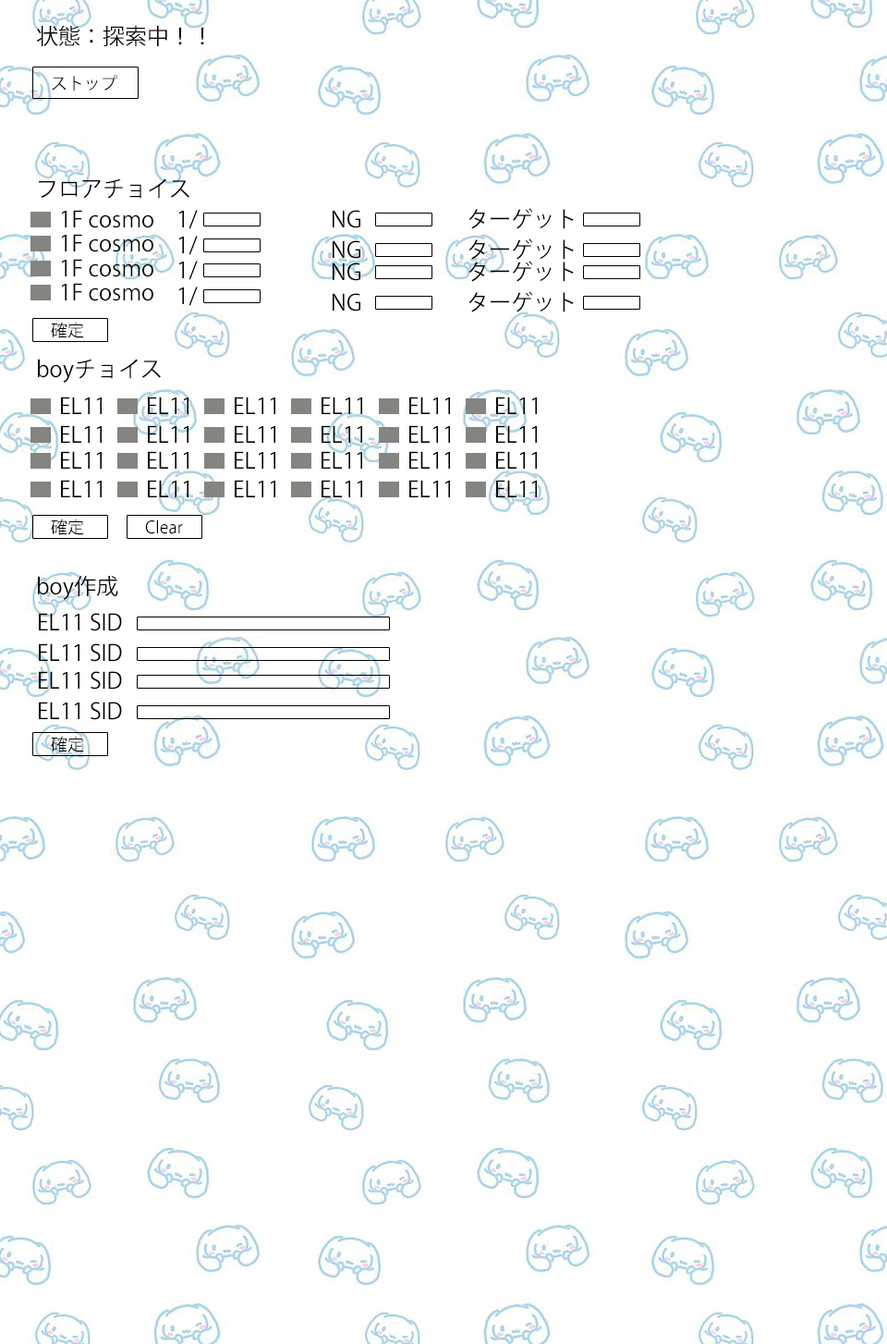
<style>
.page{position:relative;width:887px;height:1344px;background:#ffffff}
.page>*{position:absolute;margin:0}
.t1{font:22.2px "KozGoPr6N-Regular";color:#000000}
.t2{font:16.6px "KozGoPr6N-Regular";color:#000000}
</style>
<div class="page">
<p class="t1" style="left:36px;top:25px;width:168px;height:21px">状態：探索中！！</p>
<p class="t2" style="left:52px;top:75px;width:65px;height:16px">ストップ</p>
<p class="t1" style="left:39px;top:178px;width:150px;height:21px">フロアチョイス</p>
<p class="t1" style="left:61px;top:210px;width:92px;height:18px">1F cosmo</p>
<p class="t1" style="left:178px;top:210px;width:20px;height:19px">1/</p>
<p class="t1" style="left:333px;top:210px;width:27px;height:18px">NG</p>
<p class="t1" style="left:469px;top:208px;width:105px;height:21px">ターゲット</p>
<p class="t1" style="left:61px;top:234px;width:92px;height:18px">1F cosmo</p>
<p class="t1" style="left:178px;top:236px;width:20px;height:19px">1/</p>
<p class="t1" style="left:333px;top:240px;width:27px;height:19px">NG</p>
<p class="t1" style="left:469px;top:238px;width:105px;height:22px">ターゲット</p>
<p class="t1" style="left:61px;top:259px;width:92px;height:18px">1F cosmo</p>
<p class="t1" style="left:178px;top:261px;width:20px;height:19px">1/</p>
<p class="t1" style="left:333px;top:262px;width:27px;height:19px">NG</p>
<p class="t1" style="left:469px;top:261px;width:105px;height:21px">ターゲット</p>
<p class="t1" style="left:61px;top:283px;width:92px;height:18px">1F cosmo</p>
<p class="t1" style="left:178px;top:287px;width:20px;height:19px">1/</p>
<p class="t1" style="left:333px;top:293px;width:27px;height:18px">NG</p>
<p class="t1" style="left:469px;top:291px;width:105px;height:21px">ターゲット</p>
<p class="t2" style="left:51px;top:322px;width:33px;height:16px">確定</p>
<p class="t1" style="left:38px;top:359px;width:123px;height:24px">boyチョイス</p>
<p class="t1" style="left:61px;top:397px;width:41px;height:17px">EL11</p>
<p class="t1" style="left:148px;top:397px;width:41px;height:17px">EL11</p>
<p class="t1" style="left:235px;top:397px;width:40px;height:17px">EL11</p>
<p class="t1" style="left:322px;top:397px;width:40px;height:17px">EL11</p>
<p class="t1" style="left:409px;top:397px;width:41px;height:17px">EL11</p>
<p class="t1" style="left:496px;top:397px;width:41px;height:17px">EL11</p>
<p class="t1" style="left:61px;top:425px;width:41px;height:18px">EL11</p>
<p class="t1" style="left:148px;top:425px;width:41px;height:18px">EL11</p>
<p class="t1" style="left:235px;top:425px;width:40px;height:18px">EL11</p>
<p class="t1" style="left:322px;top:425px;width:40px;height:18px">EL11</p>
<p class="t1" style="left:409px;top:425px;width:41px;height:18px">EL11</p>
<p class="t1" style="left:496px;top:425px;width:41px;height:18px">EL11</p>
<p class="t1" style="left:61px;top:451px;width:41px;height:18px">EL11</p>
<p class="t1" style="left:148px;top:451px;width:41px;height:18px">EL11</p>
<p class="t1" style="left:235px;top:451px;width:40px;height:18px">EL11</p>
<p class="t1" style="left:322px;top:451px;width:40px;height:18px">EL11</p>
<p class="t1" style="left:409px;top:451px;width:41px;height:18px">EL11</p>
<p class="t1" style="left:496px;top:451px;width:41px;height:18px">EL11</p>
<p class="t1" style="left:61px;top:480px;width:41px;height:17px">EL11</p>
<p class="t1" style="left:148px;top:480px;width:41px;height:17px">EL11</p>
<p class="t1" style="left:235px;top:480px;width:40px;height:17px">EL11</p>
<p class="t1" style="left:322px;top:480px;width:40px;height:17px">EL11</p>
<p class="t1" style="left:409px;top:480px;width:41px;height:17px">EL11</p>
<p class="t1" style="left:496px;top:480px;width:41px;height:17px">EL11</p>
<p class="t2" style="left:51px;top:519px;width:33px;height:16px">確定</p>
<p class="t2" style="left:145px;top:519px;width:38px;height:15px">Clear</p>
<p class="t1" style="left:38px;top:575px;width:80px;height:25px">boy作成</p>
<p class="t1" style="left:39px;top:613px;width:83px;height:18px">EL11 SID</p>
<p class="t1" style="left:39px;top:643px;width:83px;height:19px">EL11 SID</p>
<p class="t1" style="left:39px;top:671px;width:83px;height:19px">EL11 SID</p>
<p class="t1" style="left:39px;top:702px;width:83px;height:18px">EL11 SID</p>
<p class="t2" style="left:51px;top:736px;width:33px;height:16px">確定</p>
</div>
